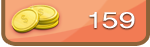
<style>
.page{position:relative;width:150px;height:47px}
.page>*{position:absolute;margin:0}
.t1{font:27.8px "InaiMathi";color:#ffffff;scale:1.32 1}
</style>
<div class="page">
<p class="t1" style="left:89px;top:12px;width:46px;height:17px">159</p>
</div>
